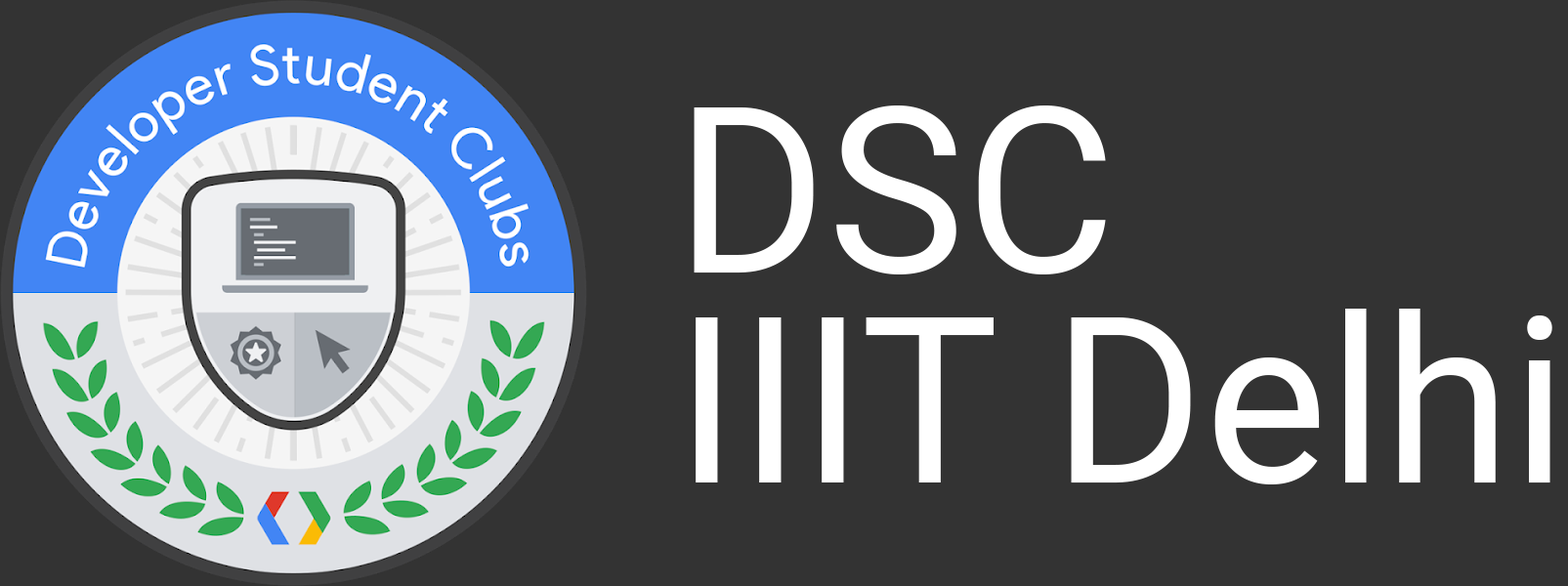
<style>
.page{position:relative;width:1568px;height:586px;background:#333333}
.page>*{position:absolute;margin:0}
.t1{font:231.9px/209.6px "Roboto-Regular";color:#ffffff}
</style>
<div class="page">
<p class="t1" style="left:694px;top:106px;width:858px;height:379px;text-align:right">DSC<br>IIIT Delhi</p>
</div>
